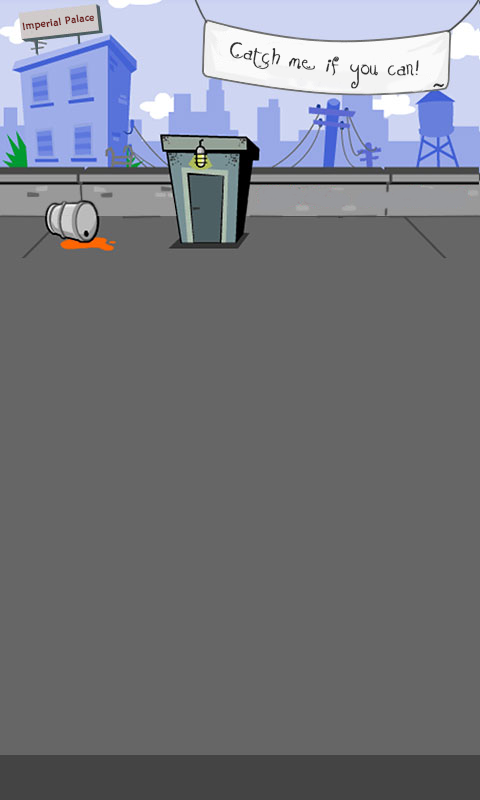
<style>
.page{position:relative;width:480px;height:800px;background:#666666}
.page>*{position:absolute;margin:0}
.t1{font:10px "MaiandraGD-Regular";letter-spacing:0.02em;color:#6c1a18;font-weight:bold}
.t2{font:17.9px/50.8px "KissMeKissMeKissMe";color:#2f2f2f;font-weight:bold}
</style>
<div class="page">
<p class="t1" style="left:22px;top:14px;width:72px;height:17px;rotate:-8deg">Imperial Palace</p>
<p class="t2" style="left:230px;top:42px;width:189px;height:47px;text-align:center">Catch me if you can!</p>
</div>
